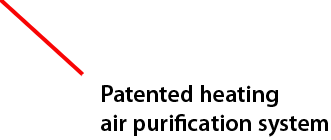
<style>
.page{position:relative;width:331px;height:140px;background:#ffffff}
.page>*{position:absolute;margin:0}
.t1{font:24px "MyriadPro-Semibold";color:#000000}
</style>
<div class="page">
<p class="t1" style="left:101px;top:85px;width:227px;height:52px">Patented heating<br>air purification system</p>
</div>
